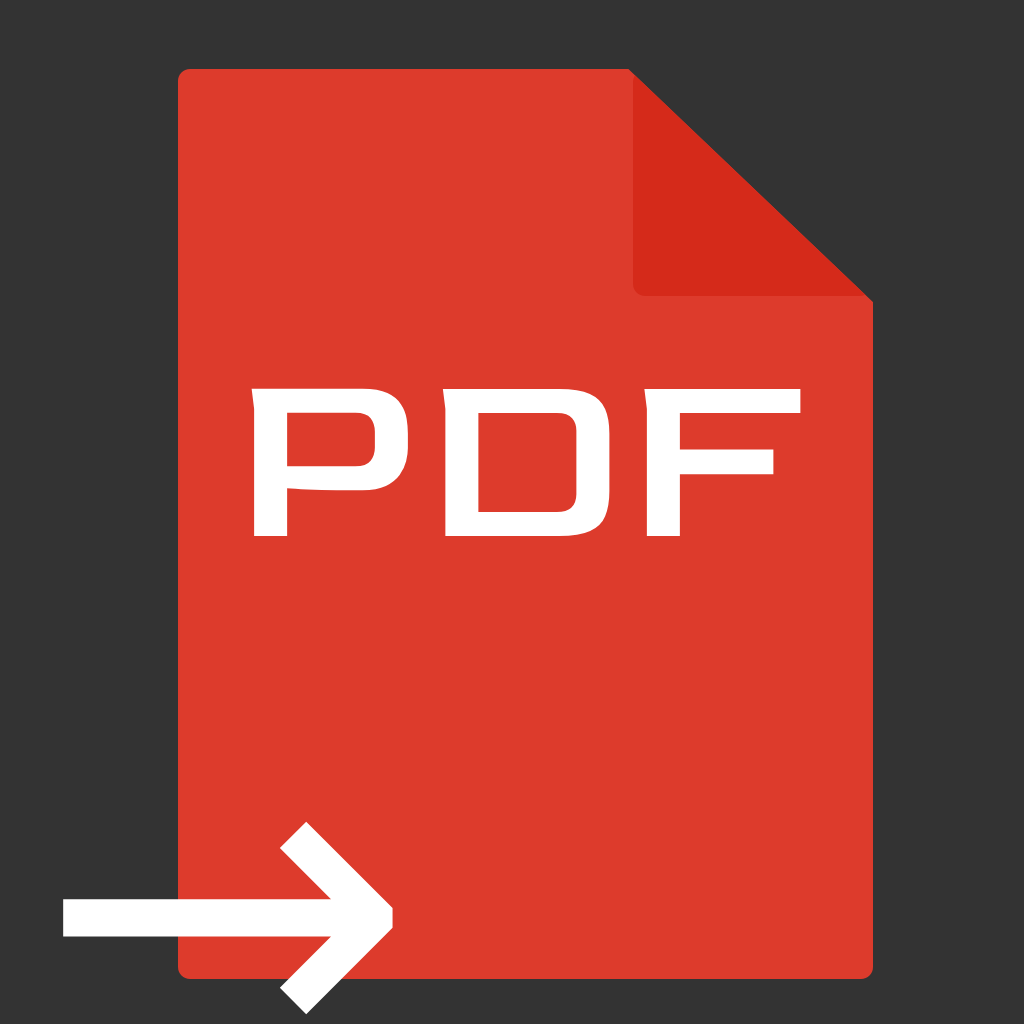
<style>
.page{position:relative;width:1024px;height:1024px;background:#dd3b2c}
.page>*{position:absolute;margin:0}
.t1{font:250px "Goldman-Regular";color:#ffffff}
</style>
<div class="page">
<p class="t1" style="left:251px;top:388px;width:550px;height:148px">PDF</p>
</div>
